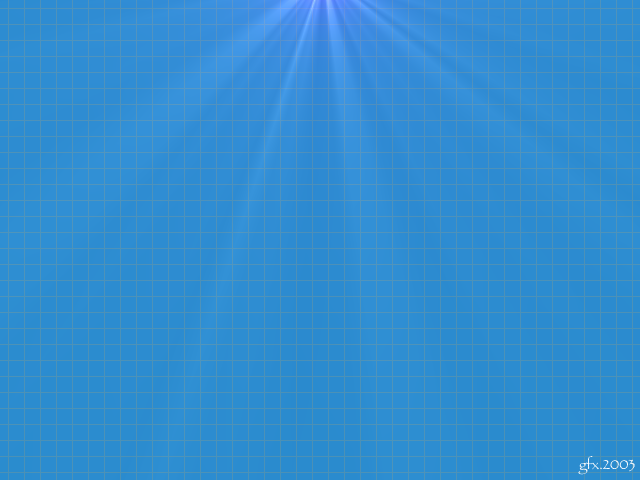
<style>
.page{position:relative;width:640px;height:480px}
.page>*{position:absolute;margin:0}
.t1{font:14px "Papyrus";color:#ffffff}
</style>
<div class="page">
<p class="t1" style="left:578px;top:456px;width:57px;height:19px">gfx.2003</p>
</div>
